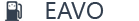
<style>
.page{position:relative;width:139px;height:21px;background:#ffffff}
.page>*{position:absolute;margin:0}
.t1{font:24px "NirmalaUI";color:#333f4f}
</style>
<div class="page">
<p class="t1" style="left:46px;top:2px;width:58px;height:17px">EAVO</p>
</div>
